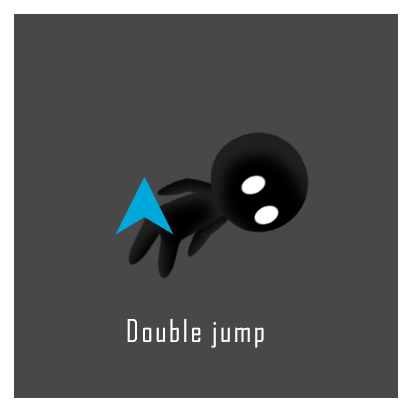
<style>
.page{position:relative;width:412px;height:412px;background:#484848}
.page>*{position:absolute;margin:0}
.t1{font:30px "AgencyFB-Reg";letter-spacing:0.08em;color:#ffffff}
</style>
<div class="page">
<p class="t1" style="left:127px;top:319px;width:137px;height:29px">Double jump</p>
</div>
